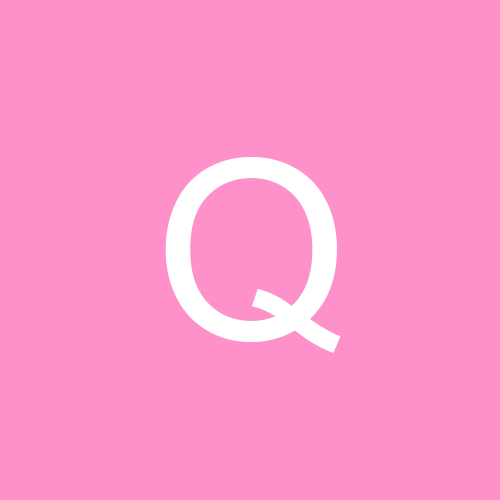
<style>
.page{position:relative;width:500px;height:500px;background:#fe91ca}
.page>*{position:absolute;margin:0}
.t1{font:250px "ArialMT";color:#ffffff}
</style>
<div class="page">
<p class="t1" style="left:165px;top:157px;width:176px;height:196px">Q</p>
</div>
